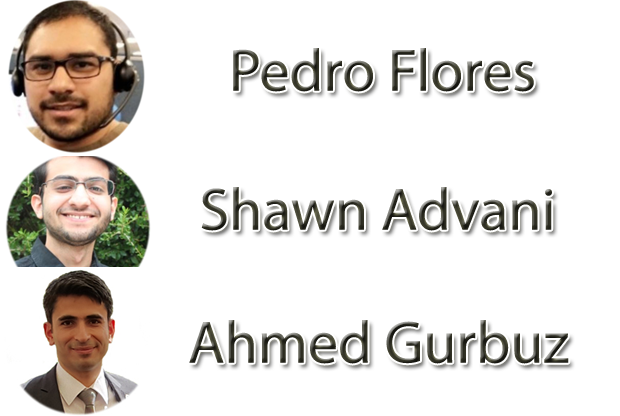
<style>
.page{position:relative;width:620px;height:416px;background:#ffffff}
.page>*{position:absolute;margin:0}
.t1{font:60px "MyriadPro-Regular"}
</style>
<div class="page">
<p class="t1" style="left:233px;top:48px;width:301px;height:44px">Pedro Flores</p>
<p class="t1" style="left:201px;top:187px;width:351px;height:44px">Shawn Advani</p>
<p class="t1" style="left:189px;top:320px;width:380px;height:44px">Ahmed Gurbuz</p>
</div>
